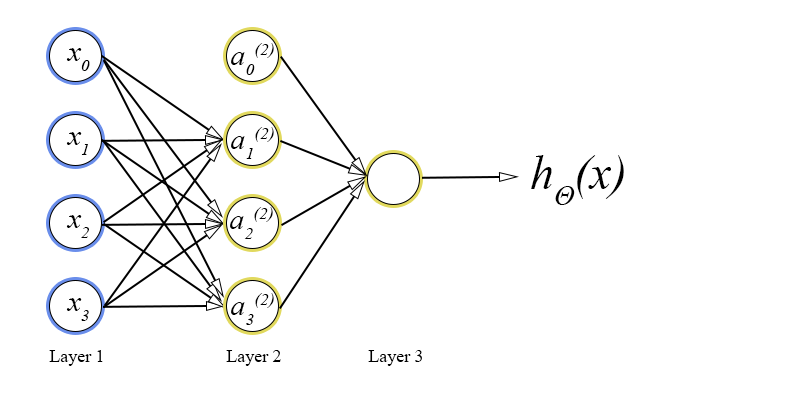
<style>
.page{position:relative;width:800px;height:420px;background:#ffffff}
.page>*{position:absolute;margin:0}
.t1{font:30px "TimesNewRomanPS-ItalicMT";color:#000000}
.t2{font:48px "TimesNewRomanPS-ItalicMT";color:#000000}
.t3{font:18px "TimesNewRomanPSMT";color:#000000}
</style>
<div class="page">
<p class="t1" style="left:66px;top:48px;width:24px;height:23px">x0</p>
<p class="t1" style="left:231px;top:43px;width:43px;height:32px">a0(2)</p>
<p class="t1" style="left:66px;top:132px;width:22px;height:23px">x1</p>
<p class="t1" style="left:231px;top:127px;width:43px;height:32px">a1(2)</p>
<p class="t2" style="left:531px;top:155px;width:93px;height:50px">hΘ(x)</p>
<p class="t1" style="left:230px;top:207px;width:43px;height:32px">a2(2)</p>
<p class="t1" style="left:66px;top:215px;width:23px;height:23px">x2</p>
<p class="t1" style="left:231px;top:293px;width:43px;height:32px">a3(2)</p>
<p class="t1" style="left:66px;top:298px;width:23px;height:23px">x3</p>
<p class="t3" style="left:49px;top:350px;width:54px;height:16px">Layer 1</p>
<p class="t3" style="left:226px;top:350px;width:55px;height:16px">Layer 2</p>
<p class="t3" style="left:368px;top:350px;width:54px;height:16px">Layer 3</p>
</div>
